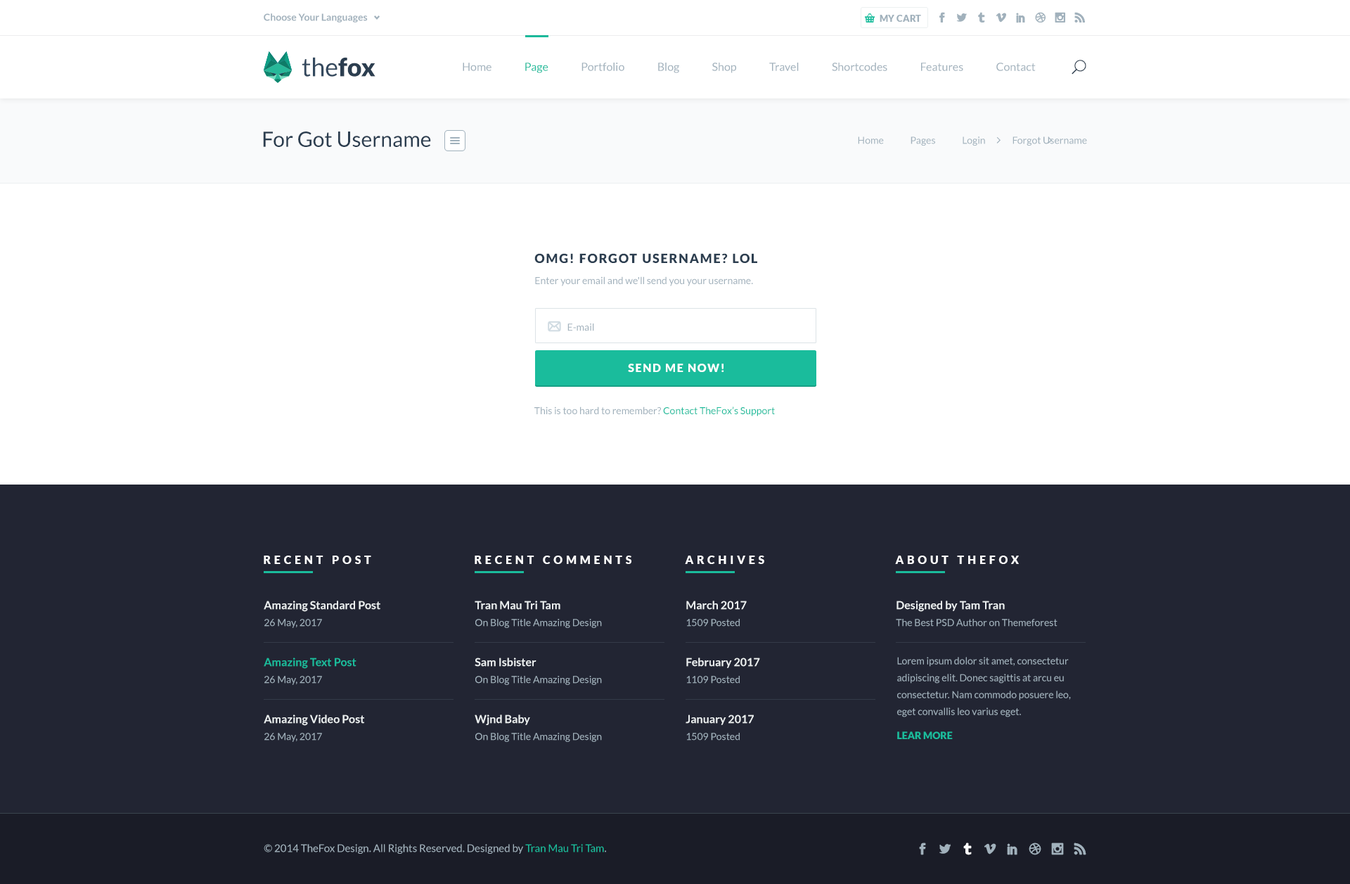
<style>
.page{position:relative;width:1350px;height:884px;background:#ffffff}
.page>*{position:absolute;margin:0}
.t1{font:9.8px "Lato-Bold";color:#a1b1bc}
.t2{font:9.1px "Lato-Black";color:#a1b1bc;text-transform:uppercase}
.t3{font:25.3px "Lato-Regular";color:#34495e}
.t4{font:25.3px "Lato-Black";color:#2c3e50}
.t5{font:11.2px "Lato-Regular";color:#a1b1bc}
.t6{font:11.2px "Lato-Regular";color:#1abc9c}
.t7{font:21.1px "Lato-Regular";color:#2c3e50}
.t8{font:9.8px "Lato-Regular";color:#a1b1bc}
.t9{font:9.8px/21.1px "Lato-Regular";color:#a1b1bc}
.t10{font:12.7px/14.1px "Lato-Black";letter-spacing:0.1em;color:#2c3e50;text-transform:uppercase}
.t11{font:11.2px "Lato-Black";letter-spacing:0.1em;color:#ffffff}
.t12{font:9.8px "Lato-Regular";color:#1abc9c}
.t13{font:11.2px "Lato-Black";letter-spacing:0.3em;color:#ffffff}
.t14{font:11.2px/16.9px "Lato-Bold";color:#ecf0f1}
.t15{font:9.8px/16.9px "Lato-Regular";color:#a1b1bc}
.t16{font:11.2px/16.9px "Lato-Bold";color:#1abc9c}
.t17{font:9.8px "Lato-Black";color:#1abc9c}
.t18{font:10.5px "Lato-Regular";color:#a1b1bc}
.t19{font:10.5px "Lato-Regular";color:#1abc9c}
</style>
<div class="page">
<p class="t1" style="left:264px;top:13px;width:104px;height:9px">Choose Your Languages</p>
<p class="t2" style="left:879px;top:15px;width:42px;height:7px">my cart</p>
<p class="t3" style="left:302px;top:57px;width:73px;height:20px">the<span class="t4">fox</span></p>
<p class="t5" style="left:463px;top:63px;width:572px;height:10px">Home               <span class="t6">Page</span>               Portfolio               Blog               Shop               Travel               Shortcodes               Features               Contact</p>
<p class="t7" style="left:263px;top:131px;width:168px;height:16px">For Got Username</p>
<p class="t8" style="left:858px;top:136px;width:229px;height:10px">Home              Pages              Login              Forgot Username</p>
<p class="t9" style="left:534px;top:253px;width:223px;height:33px"><span class="t10">OMG! FORGOT USERNAME? LOL<br></span>Enter your email and we'll send you your username.</p>
<p class="t8" style="left:567px;top:323px;width:27px;height:8px">E-mail</p>
<p class="t11" style="left:628px;top:363px;width:96px;height:9px">SEND ME NOW!</p>
<p class="t8" style="left:534px;top:406px;width:241px;height:10px">This is too hard to remember? <span class="t12">Contact TheFox’s Support</span></p>
<p class="t13" style="left:264px;top:555px;width:107px;height:9px">RECENT POST</p>
<p class="t13" style="left:474px;top:555px;width:157px;height:9px">RECENT COMMENTS</p>
<p class="t13" style="left:685px;top:555px;width:79px;height:9px">ARCHIVES</p>
<p class="t13" style="left:895px;top:555px;width:124px;height:9px">ABOUT THEFOX</p>
<p class="t14" style="left:264px;top:600px;width:116px;height:28px">Amazing Standard Post<br><span class="t15">26 May, 2017</span></p>
<p class="t15" style="left:474px;top:600px;width:128px;height:28px"><span class="t14">Tran Mau Tri Tam<br></span>On Blog Title Amazing Design</p>
<p class="t15" style="left:686px;top:600px;width:60px;height:26px"><span class="t14">March 2017<br></span>1509 Posted</p>
<p class="t15" style="left:896px;top:600px;width:161px;height:26px"><span class="t14">Designed by Tam Tran<br></span>The Best PSD Author on Themeforest</p>
<p class="t16" style="left:264px;top:657px;width:92px;height:28px">Amazing Text Post<br><span class="t15">26 May, 2017</span></p>
<p class="t15" style="left:474px;top:657px;width:128px;height:28px"><span class="t14">Sam Isbister<br></span>On Blog Title Amazing Design</p>
<p class="t14" style="left:686px;top:657px;width:74px;height:26px">February 2017<br><span class="t15">1109 Posted</span></p>
<p class="t15" style="left:897px;top:657px;width:174px;height:60px">Lorem ipsum dolor sit amet, consectetur adipiscing elit. Donec sagittis at arcu eu consectetur. Nam commodo posuere leo, eget convallis leo varius eget.</p>
<p class="t14" style="left:264px;top:714px;width:100px;height:28px">Amazing Video Post<br><span class="t15">26 May, 2017</span></p>
<p class="t15" style="left:474px;top:714px;width:128px;height:28px"><span class="t14">Wjnd Baby<br></span>On Blog Title Amazing Design</p>
<p class="t14" style="left:685px;top:714px;width:69px;height:26px">January 2017<br><span class="t15">1509 Posted</span></p>
<p class="t17" style="left:897px;top:731px;width:55px;height:8px">LEAR MORE</p>
<p class="t18" style="left:264px;top:843px;width:342px;height:10px">© 2014 TheFox Design. All Rights Reserved. Designed by <span class="t19">Tran Mau Tri Tam</span>.</p>
</div>
